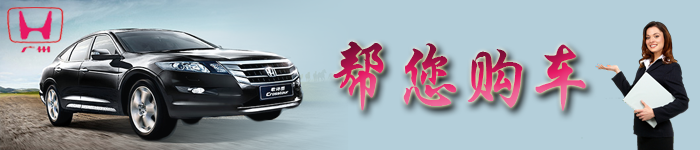
<style>
.page{position:relative;width:700px;height:150px;background:#b4cfda}
.page>*{position:absolute;margin:0}
.t1{font:72px "STXingkai";letter-spacing:-0.075em}
</style>
<div class="page">
<p class="t1" style="left:333px;top:41px;width:253px;height:70px">帮您购车</p>
</div>
